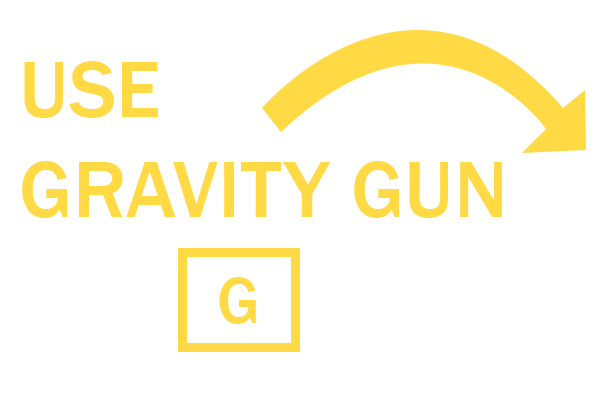
<style>
.page{position:relative;width:600px;height:400px;background:#ffffff}
.page>*{position:absolute;margin:0}
.t1{font:83.3px "FranklinGothic-Medium";color:#ffda45}
.t2{font:66.7px "FranklinGothic-Medium";color:#ffda45}
</style>
<div class="page">
<p class="t1" style="left:22px;top:61px;width:480px;height:157px">USE <br>GRAVITY GUN</p>
<p class="t2" style="left:219px;top:277px;width:37px;height:47px">G</p>
</div>
